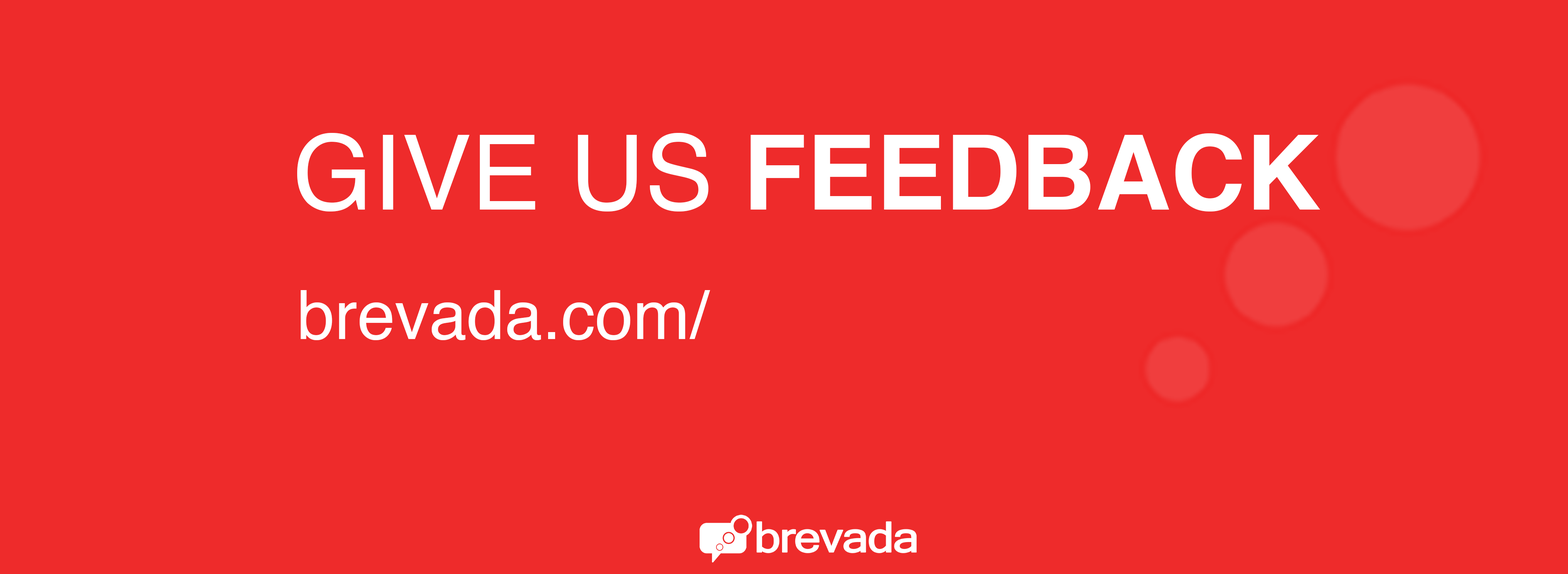
<style>
.page{position:relative;width:1568px;height:574px;background:#ee2b2b}
.page>*{position:absolute;margin:0}
.t1{font:104.1px "Helvetica-Bold";color:#ffffff}
.t2{font:104.1px "Helvetica";color:#ffffff}
.t3{font:67.8px "Helvetica";color:#ffffff}
</style>
<div class="page">
<p class="t1" style="left:297px;top:133px;width:1023px;height:79px"><span class="t2">GIVE US </span>FEEDBACK</p>
<p class="t3" style="left:301px;top:290px;width:409px;height:50px">brevada.com/</p>
</div>
